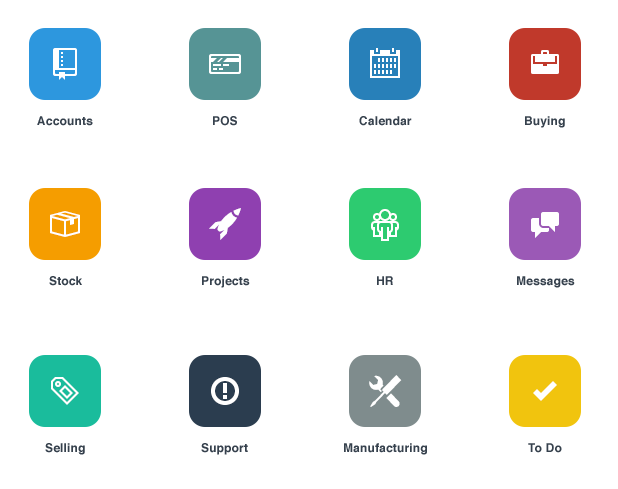
<style>
.page{position:relative;width:618px;height:489px;background:#ffffff}
.page>*{position:absolute;margin:0}
.t1{font:12px "Helvetica-Bold";letter-spacing:0.015em;color:#36414d}
</style>
<div class="page">
<p class="t1" style="left:37px;top:116px;width:56px;height:10px">Accounts</p>
<p class="t1" style="left:213px;top:116px;width:24px;height:10px">POS</p>
<p class="t1" style="left:359px;top:116px;width:53px;height:10px">Calendar</p>
<p class="t1" style="left:525px;top:116px;width:40px;height:12px">Buying</p>
<p class="t1" style="left:49px;top:276px;width:33px;height:10px">Stock</p>
<p class="t1" style="left:202px;top:276px;width:48px;height:12px">Projects</p>
<p class="t1" style="left:377px;top:276px;width:16px;height:9px">HR</p>
<p class="t1" style="left:517px;top:276px;width:58px;height:12px">Messages</p>
<p class="t1" style="left:45px;top:443px;width:40px;height:12px">Selling</p>
<p class="t1" style="left:201px;top:443px;width:47px;height:12px">Support</p>
<p class="t1" style="left:344px;top:443px;width:83px;height:12px">Manufacturing</p>
<p class="t1" style="left:528px;top:443px;width:34px;height:10px">To Do</p>
</div>
